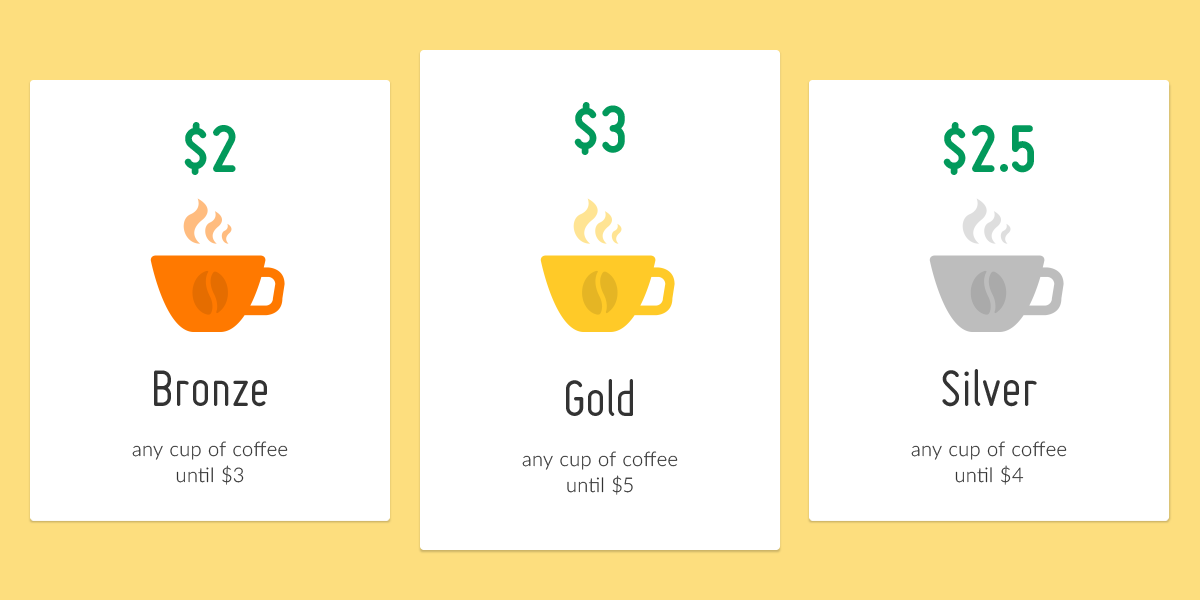
<style>
.page{position:relative;width:1200px;height:600px;background:#ffffff}
.page>*{position:absolute;margin:0}
.t1{font:70px "Miso-Bold";letter-spacing:0.025em;color:#02995b}
.t2{font:70px "Miso-Bold";color:#02995b}
.t3{font:20px/26px "Lato-Light";letter-spacing:0.025em;color:#333333}
.t4{font:56px/24px "Miso";color:#333333}
</style>
<div class="page">
<p class="t1" style="left:574px;top:102px;width:51px;height:53px">$<span class="t2">3</span></p>
<p class="t1" style="left:184px;top:122px;width:52px;height:53px">$2</p>
<p class="t2" style="left:943px;top:122px;width:91px;height:53px"><span class="t1">$</span>2.5</p>
<p class="t3" style="left:132px;top:370px;width:156px;height:115px;text-align:center"><span class="t4">Bronze<br><br></span>any cup of coffee<br>until $3</p>
<p class="t3" style="left:911px;top:369px;width:156px;height:116px;text-align:center"><span class="t4">Silver<br><br></span>any cup of coffee<br>until $4</p>
<p class="t3" style="left:522px;top:379px;width:156px;height:116px;text-align:center"><span class="t4">Gold<br><br></span>any cup of coffee<br>until $5</p>
</div>
